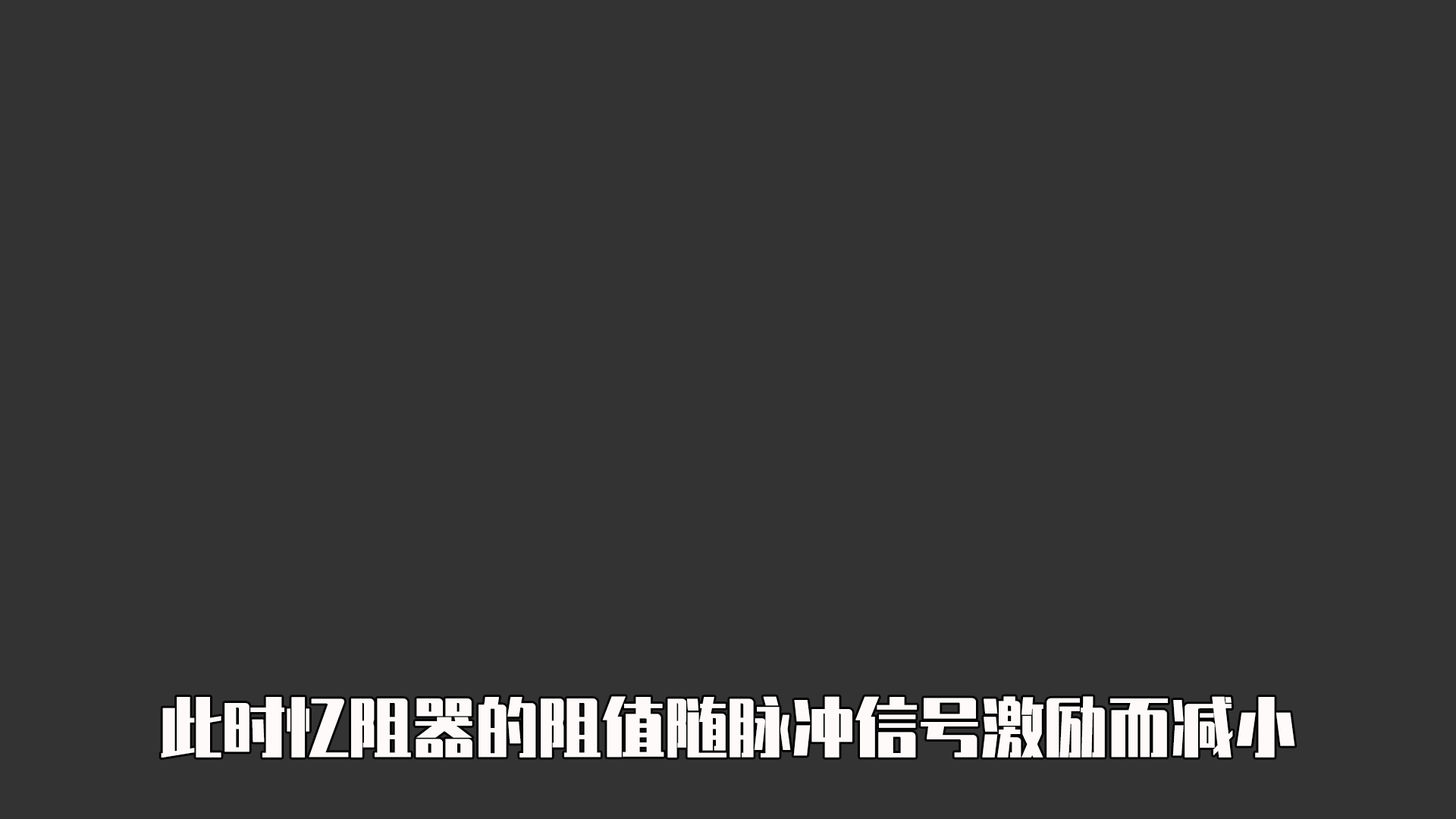
<style>
.page{position:relative;width:1456px;height:819px;background:#333333}
.page>*{position:absolute;margin:0}
.t1{font:63.2px "ZhenyanGB-Regular";color:#fefafa}
</style>
<div class="page">
<p class="t1" style="left:161px;top:696px;width:1134px;height:62px">此时忆阻器的阻值随脉冲信号激励而减小</p>
</div>
